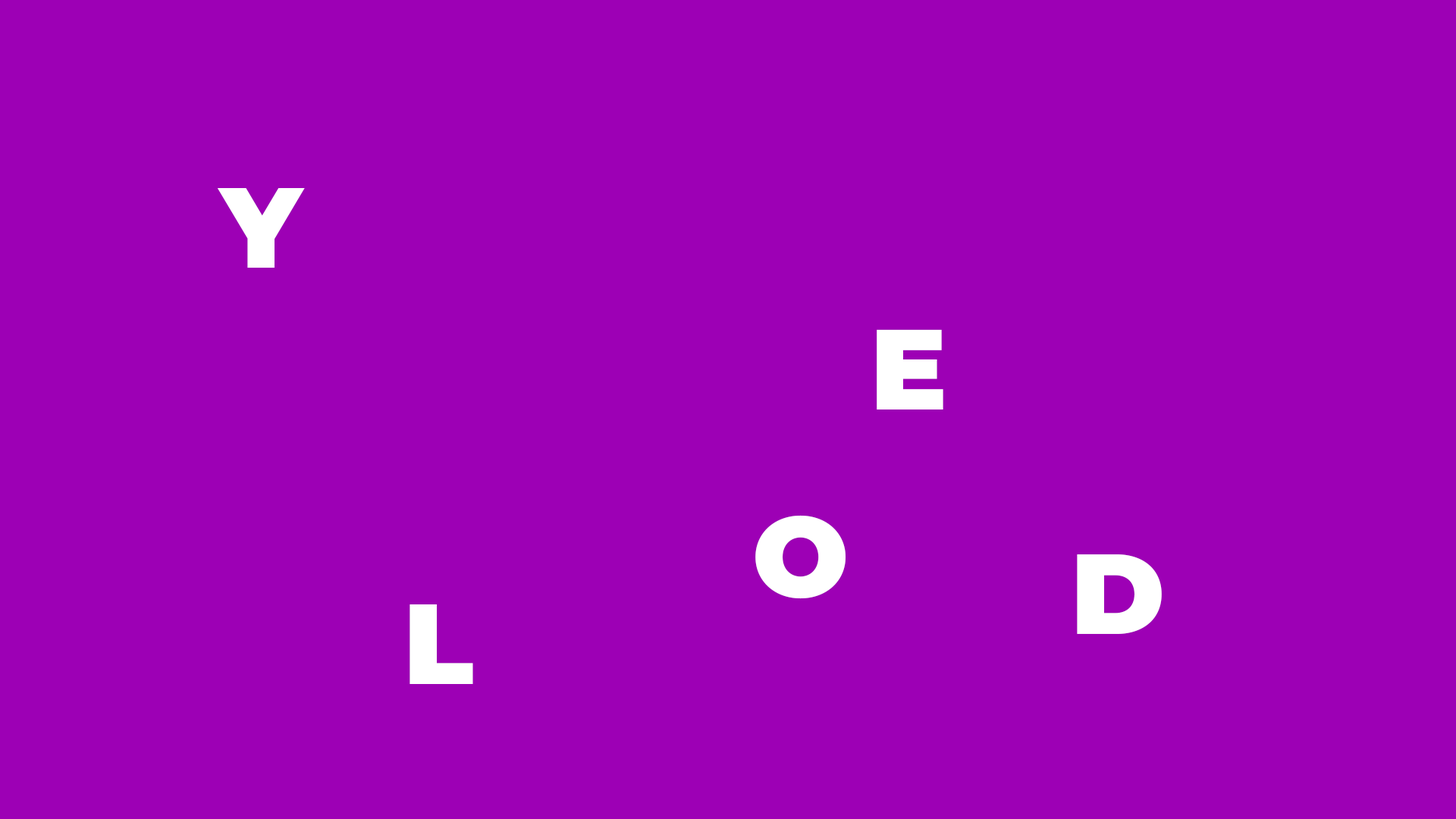
<style>
.page{position:relative;width:1456px;height:819px;background:#9d00b5}
.page>*{position:absolute;margin:0}
.t1{font:113.7px "Montserrat-Black";color:#ffffff}
.t2{font:113.7px "MontserratAlternates-Black";color:#ffffff}
</style>
<div class="page">
<p class="t1" style="left:217px;top:188px;width:88px;height:80px">Y</p>
<p class="t1" style="left:877px;top:329px;width:66px;height:80px">E</p>
<p class="t2" style="left:755px;top:515px;width:91px;height:84px">O</p>
<p class="t2" style="left:1077px;top:554px;width:85px;height:80px">D</p>
<p class="t1" style="left:409px;top:604px;width:64px;height:80px">L</p>
</div>
